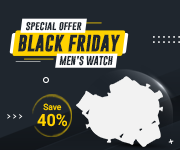
<style>
.page{position:relative;width:180px;height:150px;background:#1f262e}
.page>*{position:absolute;margin:0}
.t1{font:9.3px "GoboldBold";color:#1f262e}
.t2{font:16.8px "GoboldBold";color:#1f262e;font-weight:bold}
.t3{font:16.9px "Heebo-Bold";color:#ffd200;scale:0.96 1}
.t4{font:8.7px "Heebo-Medium";color:#ffd200;scale:0.96 1}
</style>
<div class="page">
<p class="t1" style="left:25px;top:21px;width:57px;height:10px">special offer</p>
<p class="t2" style="left:18px;top:34px;width:102px;height:18px">BLACK FRIDAY</p>
<p class="t1" style="left:59px;top:55px;width:54px;height:11px">MEN’S WATCH</p>
<p class="t3" style="left:37px;top:113px;width:30px;height:14px">40%</p>
<p class="t4" style="left:43px;top:103px;width:19px;height:8px">Save</p>
</div>
